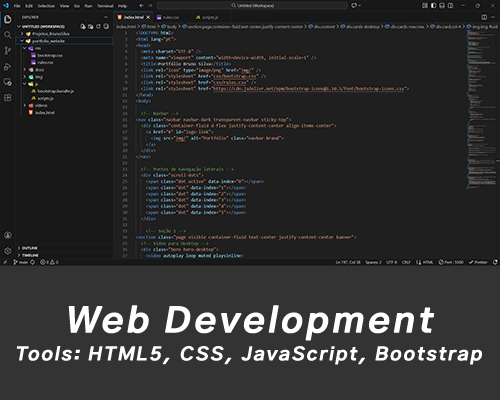
<style>
.page{position:relative;width:500px;height:400px;background:#1f1f1f}
.page>*{position:absolute;margin:0}
.t1{font:38.1px "LinearGrotesk-SemiBold";letter-spacing:0.12em;color:#ffffff;font-weight:bold;font-style:italic}
.t2{font:20px "LinearGrotesk-SemiBold";letter-spacing:0.12em;color:#ffffff;font-weight:bold;font-style:italic}
</style>
<div class="page">
<p class="t1" style="left:68px;top:305px;width:367px;height:36px">Web Development</p>
<p class="t2" style="left:16px;top:346px;width:466px;height:19px">Tools: HTML5, CSS, JavaScript, Bootstrap</p>
</div>
